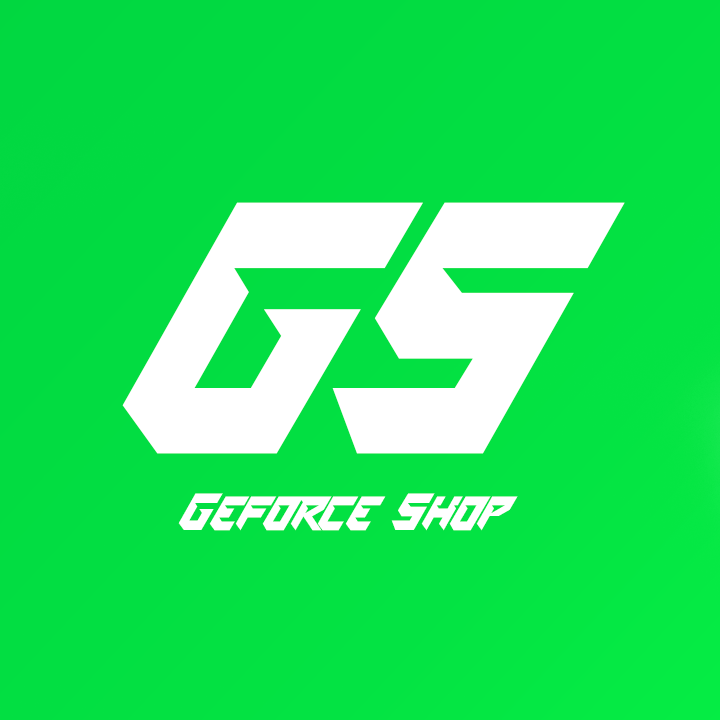
<style>
.page{position:relative;width:720px;height:720px}
.page>*{position:absolute;margin:0}
.t1{font:349.1px "SPACEMISSION";color:#ffffff;scale:0.96 1}
.t2{font:51px "SPACEMISSION";color:#ffffff;scale:0.96 1}
</style>
<div class="page">
<p class="t1" style="left:122px;top:202px;width:503px;height:252px">GS</p>
<p class="t2" style="left:178px;top:493px;width:340px;height:38px">Geforce Shop</p>
</div>
